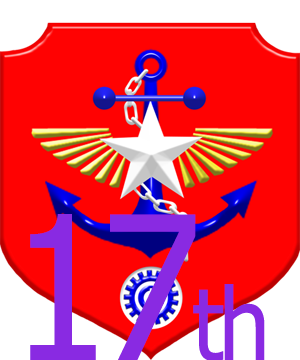
<style>
.page{position:relative;width:300px;height:360px;background:#ff0202}
.page>*{position:absolute;margin:0}
.t1{font:200px "Zawgyi-One";letter-spacing:-0.05em;color:#892ae2;scale:0.92 1}
.t2{font:100px "Zawgyi-One";letter-spacing:-0.05em;color:#892ae2;scale:0.92 1}
</style>
<div class="page">
<p class="t1" style="left:30px;top:214px;width:235px;height:148px">17<span class="t2">th</span>hh</p>
</div>
